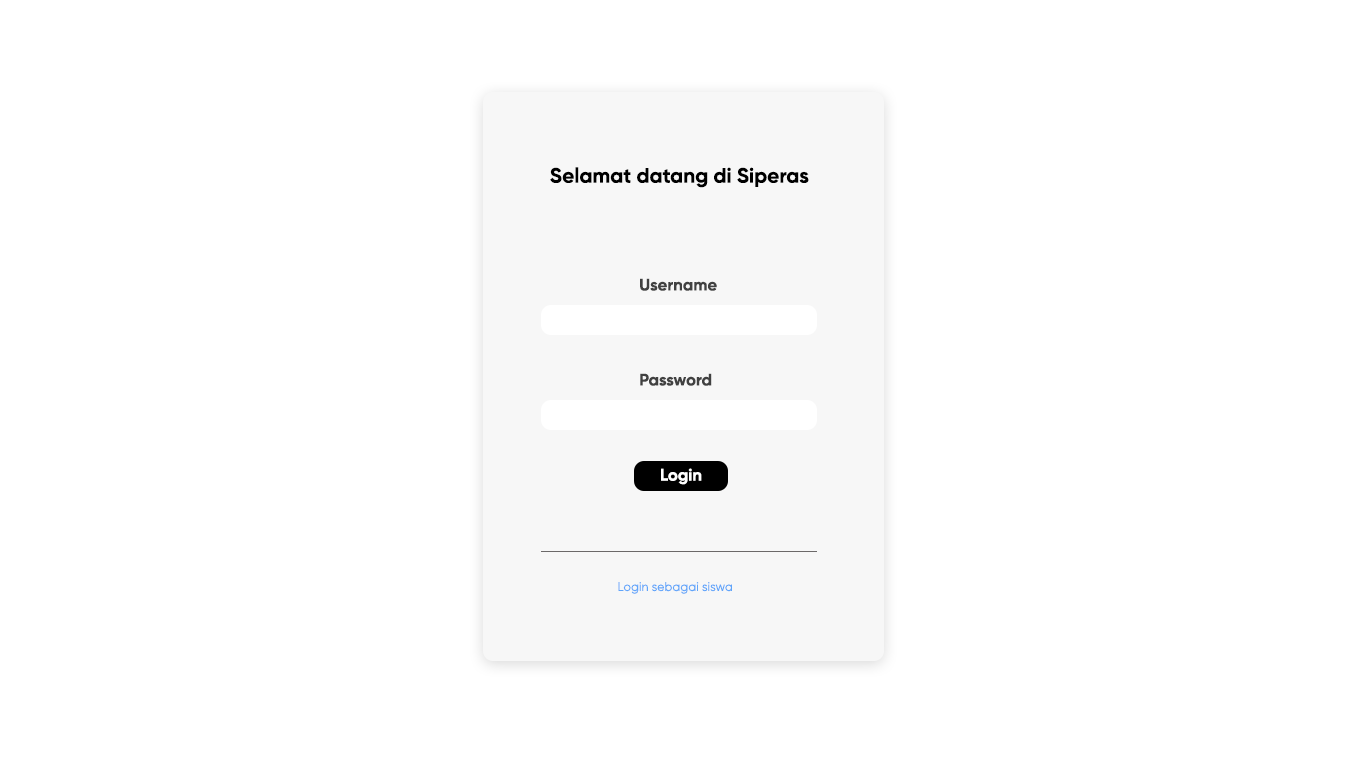
<style>
.page{position:relative;width:1366px;height:768px;background:#ffffff}
.page>*{position:absolute;margin:0}
.t1{font:20.8px "Gilroy-Bold";color:#000000}
.t2{font:16.7px "Gilroy-Bold";color:#414141}
.t3{font:16.7px "Gilroy-Bold";color:#ffffff}
.t4{font:12.5px "Gilroy-Regular";color:#60a5fa}
</style>
<div class="page">
<p class="t1" style="left:550px;top:167px;width:259px;height:21px">Selamat datang di Siperas</p>
<p class="t2" style="left:640px;top:278px;width:77px;height:13px">Username</p>
<p class="t2" style="left:640px;top:373px;width:72px;height:13px">Password</p>
<p class="t3" style="left:661px;top:468px;width:41px;height:17px">Login</p>
<p class="t4" style="left:618px;top:582px;width:114px;height:12px">Login sebagai siswa</p>
</div>
